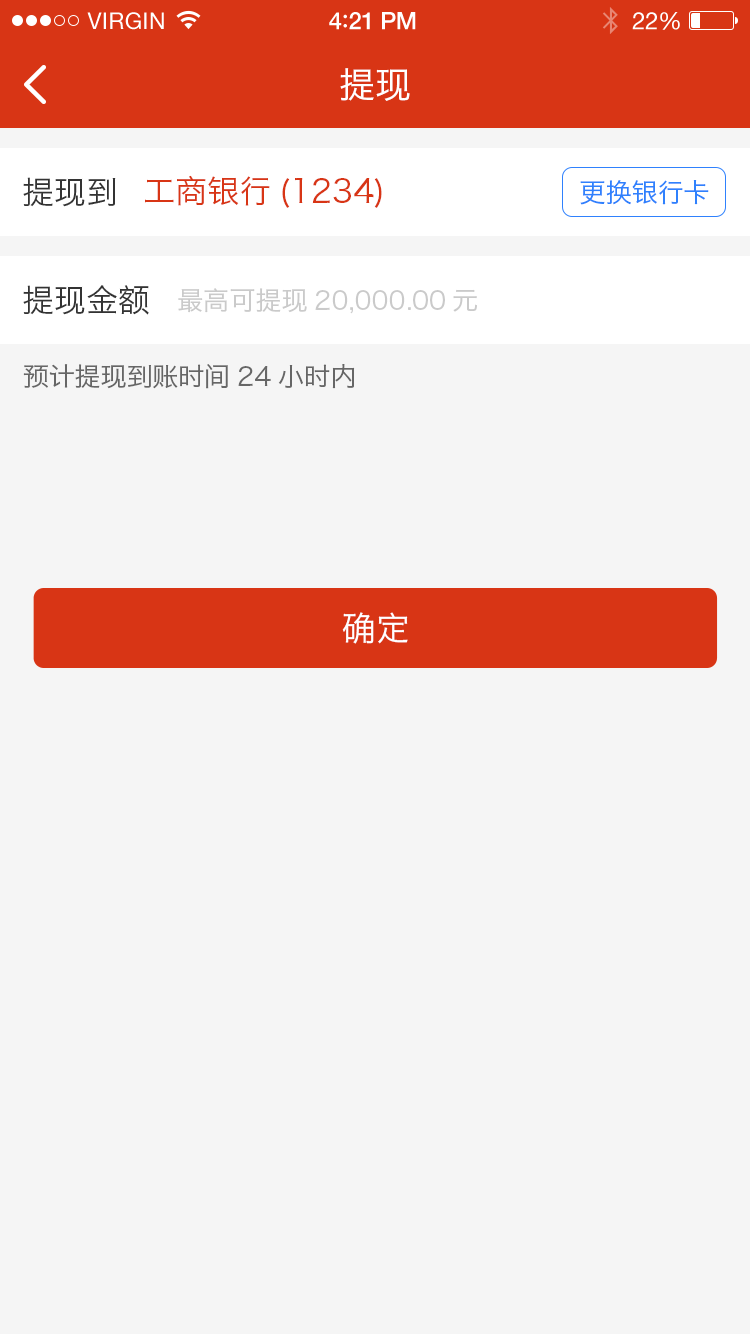
<style>
.page{position:relative;width:750px;height:1334px;background:#f5f5f5}
.page>*{position:absolute;margin:0}
.t1{font:23px "HelveticaNeue";letter-spacing:0.02em;color:#ffffff}
.t2{font:24px "HelveticaNeue-Medium";letter-spacing:-0.02em;color:#ffffff}
.t3{font:26px "Avenir-Medium";letter-spacing:-0.02em;color:#ffffff}
.t4{font:24px "HelveticaNeue";letter-spacing:-0.02em;color:#ffffff}
.t5{font:36px "HiraginoSansGB-W3";color:#ffffff}
.t6{font:32px "HiraginoSansGB-W3";color:#333333}
.t7{font:32px "HiraginoSansGB-W3";color:#d83515}
.t8{font:26px "HiraginoSansGB-W3";color:#2f81fd}
.t9{font:26px "HiraginoSansGB-W3";color:#cacaca}
.t10{font:26px "HiraginoSansGB-W3";color:#666666}
.t11{font:34px "HiraginoSansGB-W3";color:#ffffff}
</style>
<div class="page">
<p class="t1" style="left:87px;top:12px;width:77px;height:18px">VIRGIN</p>
<p class="t2" style="left:329px;top:12px;width:87px;height:18px">4<span class="t3">:</span>21 PM</p>
<p class="t4" style="left:632px;top:12px;width:48px;height:18px">22%</p>
<p class="t5" style="left:340px;top:68px;width:70px;height:33px">提现</p>
<p class="t6" style="left:23px;top:177px;width:93px;height:30px">提现到</p>
<p class="t7" style="left:145px;top:175px;width:237px;height:33px">工商银行(1234)</p>
<p class="t8" style="left:580px;top:180px;width:129px;height:25px">更换银行卡</p>
<p class="t6" style="left:23px;top:285px;width:126px;height:30px">提现金额</p>
<p class="t9" style="left:178px;top:288px;width:299px;height:26px">最高可提现20,000.00元</p>
<p class="t10" style="left:23px;top:364px;width:332px;height:25px">预计提现到账时间24小时内</p>
<p class="t11" style="left:342px;top:612px;width:66px;height:32px">确定</p>
</div>
